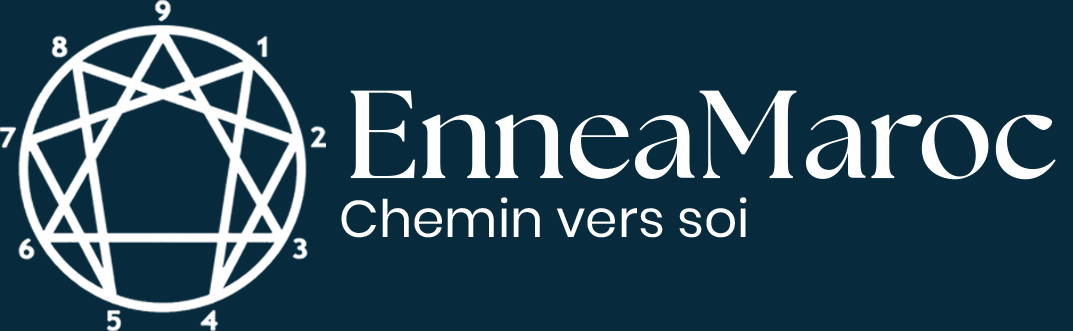
<style>
.page{position:relative;width:1073px;height:331px;background:#072b3d}
.page>*{position:absolute;margin:0}
.t1{font:124.8px "FONTSPRINGDEMO-TheSeasonsBold";color:#ffffff}
.t2{font:51.8px "Poppins-Regular";color:#ffffff}
</style>
<div class="page">
<p class="t1" style="left:350px;top:90px;width:706px;height:90px">EnneaMaroc</p>
<p class="t2" style="left:341px;top:197px;width:406px;height:41px">Chemin vers soi</p>
</div>
